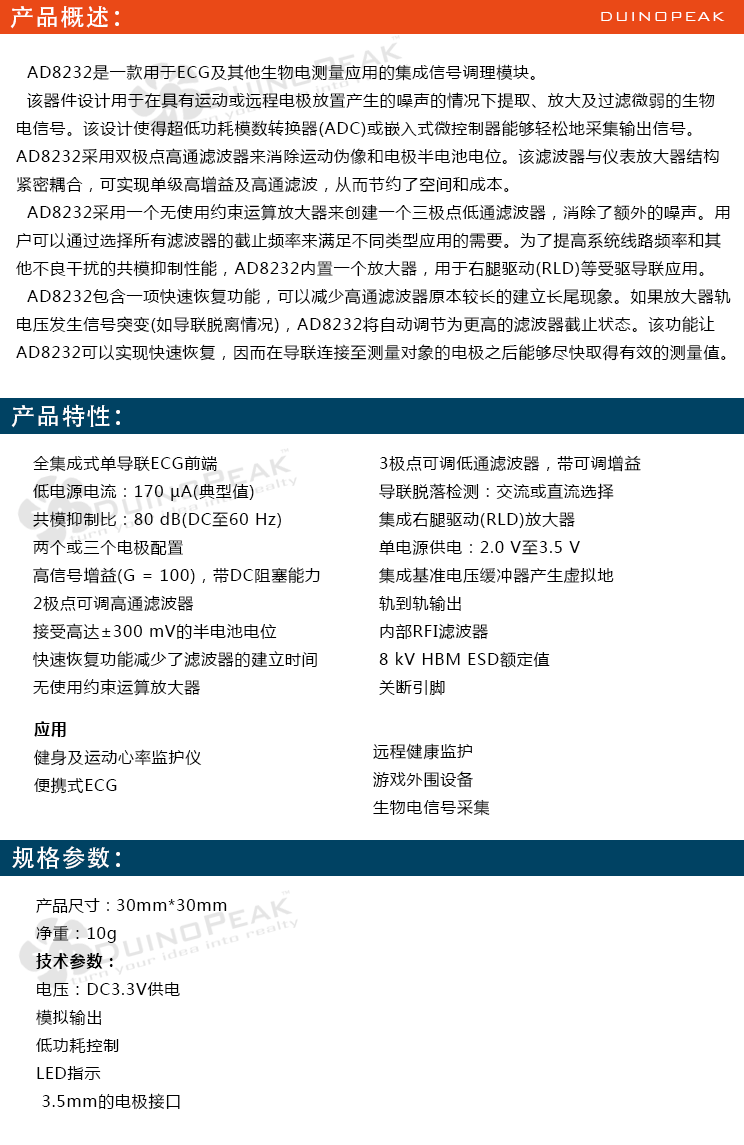
<style>
.page{position:relative;width:744px;height:1145px;background:#ffffff}
.page>*{position:absolute;margin:0}
.t1{font:24px "AdobeHeitiStd-Regular";letter-spacing:0.05em;color:#ffffff}
.t2{font:18px "BankGothicBT-Light";letter-spacing:0.05em;color:#ffffff}
.t3{font:16px "MicrosoftYaHei";letter-spacing:0.05em;color:#000000}
.t4{font:16px "MicrosoftYaHei-Bold";letter-spacing:0.05em;color:#000000}
.t5{font:16px "MicrosoftYaHei";color:#000000}
</style>
<div class="page">
<p class="t1" style="left:10px;top:6px;width:109px;height:23px">产品概述：</p>
<p class="t2" style="left:601px;top:12px;width:124px;height:9px">DUINOPEAK</p>
<p class="t3" style="left:16px;top:64px;width:715px;height:297px">AD8232是一款用于ECG及其他生物电测量应用的集成信号调理模块。<br>  该器件设计用于在具有运动或远程电极放置产生的噪声的情况下提取、放大及过滤微弱的生物<br>电信号。该设计使得超低功耗模数转换器(ADC)或嵌入式微控制器能够轻松地采集输出信号。<br>AD8232采用双极点高通滤波器来消除运动伪像和电极半电池电位。该滤波器与仪表放大器结构<br>紧密耦合，可实现单级高增益及高通滤波，从而节约了空间和成本。<br>  AD8232采用一个无使用约束运算放大器来创建一个三极点低通滤波器，消除了额外的噪声。用<br>户可以通过选择所有滤波器的截止频率来满足不同类型应用的需要。为了提高系统线路频率和其<br>他不良干扰的共模抑制性能，AD8232内置一个放大器，用于右腿驱动(RLD)等受驱导联应用。<br>  AD8232包含一项快速恢复功能，可以减少高通滤波器原本较长的建立长尾现象。如果放大器轨<br>电压发生信号突变(如导联脱离情况)，AD8232将自动调节为更高的滤波器截止状态。该功能让<br>AD8232可以实现快速恢复，因而在导联连接至测量对象的电极之后能够尽快取得有效的测量值。</p>
<p class="t1" style="left:11px;top:404px;width:109px;height:24px">产品特性：</p>
<p class="t3" style="left:33px;top:455px;width:287px;height:241px">全集成式单导联ECG前端<br>低电源电流：170 µA(典型值)<br>共模抑制比：80 dB(DC至60 Hz)<br>两个或三个电极配置<br>高信号增益(G = 100)，带DC阻塞能力<br>2极点可调高通滤波器<br>接受高达±300 mV的半电池电位<br>快速恢复功能减少了滤波器的建立时间<br>无使用约束运算放大器</p>
<p class="t3" style="left:379px;top:455px;width:262px;height:240px">3极点可调低通滤波器，带可调增益<br>导联脱落检测：交流或直流选择<br>集成右腿驱动(RLD)放大器<br>单电源供电：2.0 V至3.5 V<br>集成基准电压缓冲器产生虚拟地<br>轨到轨输出<br>内部RFI滤波器<br>8 kV HBM ESD额定值<br>关断引脚</p>
<p class="t3" style="left:34px;top:721px;width:168px;height:73px"><span class="t4">应用<br></span>健身及运动心率监护仪<br>便携式ECG</p>
<p class="t3" style="left:373px;top:743px;width:117px;height:73px">远程健康监护<br>游戏外围设备<br>生物电信号采集</p>
<p class="t1" style="left:12px;top:846px;width:108px;height:23px">规格参数：</p>
<p class="t3" style="left:36px;top:898px;width:191px;height:211px"><span class="t5">产品尺寸：</span>30mm*30mm<br>净重：10g<br><span class="t4">技术参数：<br></span>电压：DC3.3V供电<br>模拟输出<br>低功耗控制<br>LED指示<br> 3.5mm的电极接口</p>
</div>
